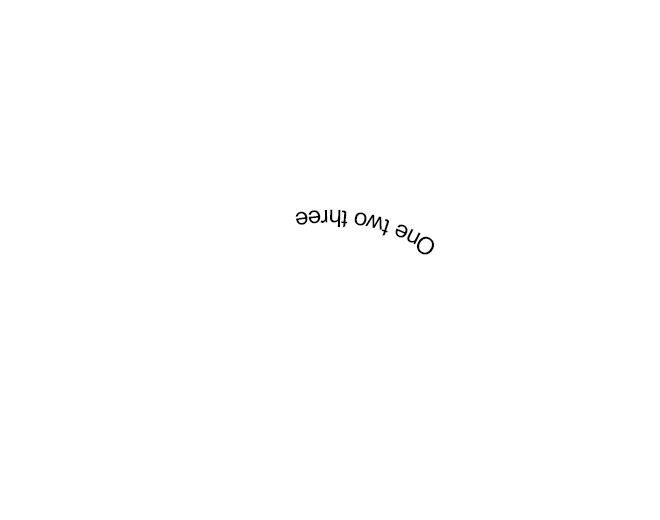
<style>
.page{position:relative;width:660px;height:520px;background:#ffffff}
.page>*{position:absolute;margin:0}
.t1{font:24px "ArialMT";color:#000000}
</style>
<div class="page">
<p class="t1" style="left:295px;top:209px;width:139px;height:46px;text-align:center">One two three</p>
</div>
